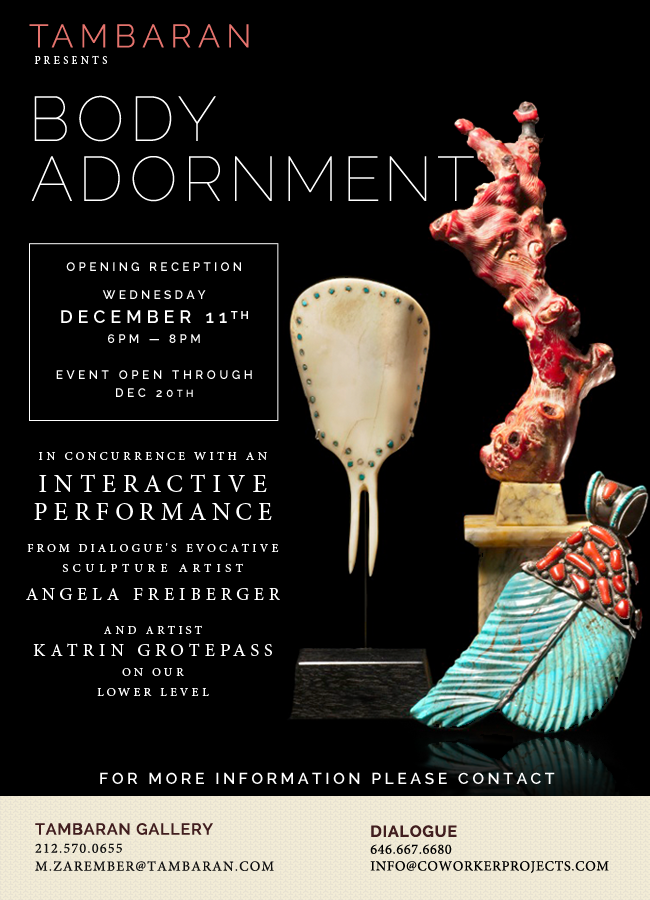
<style>
.page{position:relative;width:650px;height:900px;background:#000000}
.page>*{position:absolute;margin:0}
.t1{font:32.5px "Raleway-Light";letter-spacing:0.19em;color:#e5736d}
.t2{font:11px "MinionPro-Regular";letter-spacing:0.27em;color:#ffffff;text-transform:uppercase}
.t3{font:62.8px/60.1px "Raleway-Thin";letter-spacing:0.1em;color:#ffffff;text-transform:uppercase}
.t4{font:12px/28px "Raleway-SemiBold";letter-spacing:0.27em;color:#ffffff;text-transform:uppercase}
.t5{font:18px/24px "Raleway-SemiBold";letter-spacing:0.27em;color:#ffffff;text-transform:uppercase}
.t6{font:11px/24px "Raleway-Bold";letter-spacing:0.27em;color:#ffffff;text-transform:uppercase}
.t7{font:12px/20px "Raleway-SemiBold";letter-spacing:0.27em;color:#ffffff;text-transform:uppercase}
.t8{font:12px/18px "Raleway-SemiBold";letter-spacing:0.29em;color:#ffffff;text-transform:uppercase}
.t9{font:10px/18px "Raleway-SemiBold";letter-spacing:0.29em;color:#ffffff;text-transform:uppercase}
.t10{font:12px/24.1px "MinionPro-Regular";letter-spacing:0.27em;color:#ffffff;text-transform:uppercase}
.t11{font:12px/20.1px "MinionPro-Regular";letter-spacing:0.27em;color:#ffffff;text-transform:uppercase}
.t12{font:25px/32.1px "MinionPro-Regular";letter-spacing:0.27em;color:#ffffff;text-transform:uppercase}
.t13{font:25px/28.1px "MinionPro-Regular";letter-spacing:0.27em;color:#ffffff;text-transform:uppercase}
.t14{font:12px/8.1px "MinionPro-Regular";letter-spacing:0.27em;color:#ffffff;text-transform:uppercase}
.t15{font:12px/20.1px "MinionPro-Regular";letter-spacing:0.39em;color:#ffffff;text-transform:uppercase}
.t16{font:18px/28.1px "MinionPro-Regular";letter-spacing:0.27em;color:#ffffff;text-transform:uppercase}
.t17{font:12px/34.1px "MinionPro-Regular";letter-spacing:0.27em;color:#ffffff;text-transform:uppercase}
.t18{font:18px "MinionPro-Regular";letter-spacing:0.27em;color:#ffffff;text-transform:uppercase}
.t19{font:16px "Raleway-SemiBold";letter-spacing:0.21em;color:#ffffff;text-transform:uppercase}
.t20{font:14px/18px "MinionPro-Regular";letter-spacing:0.09em;color:#101010;text-transform:uppercase}
.t21{font:16px/18px "Raleway-SemiBold";letter-spacing:0.05em;color:#411e1f;text-transform:uppercase}
.t22{font:14px "MinionPro-Regular";letter-spacing:0.05em;color:#000000;text-transform:uppercase}
.t23{font:16px "Raleway-Bold";letter-spacing:0.05em;color:#411e1f;text-transform:uppercase}
</style>
<div class="page">
<p class="t1" style="left:29px;top:24px;width:220px;height:24px">TAMBARAN</p>
<p class="t2" style="left:34px;top:55px;width:73px;height:9px">PRESENTS</p>
<p class="t3" style="left:31px;top:95px;width:443px;height:107px">BODY ADORNMENT</p>
<p class="t4" style="left:56px;top:262px;width:196px;height:135px;text-align:center">opening reception<br>WednesdaY <br><span class="t5">December 11</span><span class="t6">th<br></span><span class="t7">6pm — 8pm<br><br></span><span class="t8">EvENT OPEN THROUGH <br>DEC 20</span><span class="t9">TH</span></p>
<p class="t10" style="left:26px;top:451px;width:254px;height:245px;text-align:center"><span class="t11">in Concurrence with an<br></span><span class="t12">Interactive <br></span><span class="t13">Performance</span><span class="t11"> <br></span><span class="t14"><br></span>from Dialogue's evocative <span class="t15">sculpture artist<br></span><span class="t16">Angela Freiberger<br></span><span class="t17">and artist</span><span class="t11"> <br></span><span class="t18">Katrin Grotepass <br></span><span class="t11">on our <br>Lower Level</span></p>
<p class="t19" style="left:100px;top:772px;width:455px;height:13px">For More Information Please Contact</p>
<p class="t20" style="left:35px;top:823px;width:239px;height:48px"><span class="t21">Tambaran Gallery<br></span>212.570.0655<br>m.zarember@tambaran.com</p>
<p class="t22" style="left:370px;top:825px;width:239px;height:48px"><span class="t23">Dialogue<br></span>646.667.6680<br>info@coworkerprojects.com</p>
</div>
